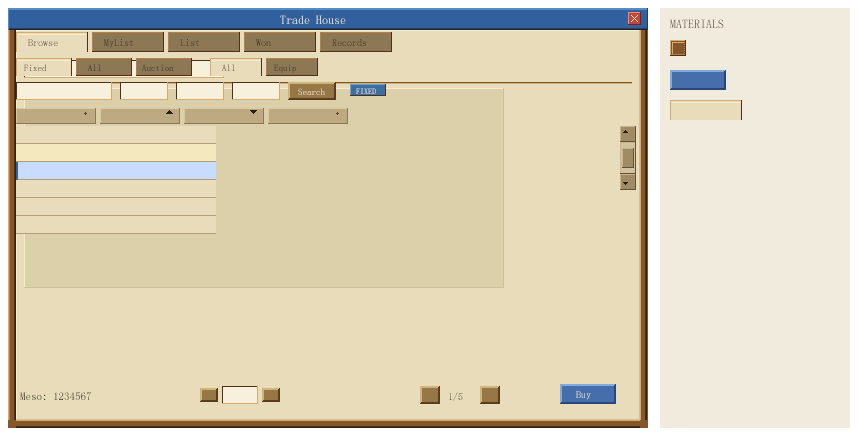
<style>
.page{position:relative;width:860px;height:440px;background:#e8dcba}
.page>*{position:absolute;margin:0}
.t1{font:12px "SimSun"}
.t2{font:10px "SimSun"}
.t3{font:9px "SimSun"}
.t4{font:8px "SimSun"}
.t5{font:11px "SimSun"}
</style>
<div class="page">
<p class="t1" style="left:280px;top:15px;width:66px;height:9px">Trade House</p>
<p class="t1" style="left:670px;top:19px;width:54px;height:9px">MATERIALS</p>
<p class="t2" style="left:28px;top:39px;width:30px;height:7px">Browse</p>
<p class="t2" style="left:104px;top:39px;width:30px;height:9px">MyList</p>
<p class="t2" style="left:180px;top:39px;width:20px;height:7px">List</p>
<p class="t2" style="left:256px;top:39px;width:15px;height:7px">Won</p>
<p class="t2" style="left:332px;top:38px;width:35px;height:8px">Records</p>
<p class="t3" style="left:24px;top:64px;width:23px;height:7px">Fixed</p>
<p class="t3" style="left:88px;top:64px;width:13px;height:7px">All</p>
<p class="t3" style="left:142px;top:64px;width:32px;height:7px">Auction</p>
<p class="t3" style="left:222px;top:64px;width:13px;height:7px">All</p>
<p class="t3" style="left:274px;top:64px;width:22px;height:9px">Equip</p>
<p class="t3" style="left:298px;top:88px;width:27px;height:7px">Search</p>
<p class="t4" style="left:356px;top:88px;width:20px;height:6px">FIXED</p>
<p class="t5" style="left:20px;top:392px;width:71px;height:8px">Meso: 1234567</p>
<p class="t2" style="left:449px;top:392px;width:14px;height:9px">1/5</p>
<p class="t2" style="left:576px;top:391px;width:15px;height:9px">Buy</p>
</div>
